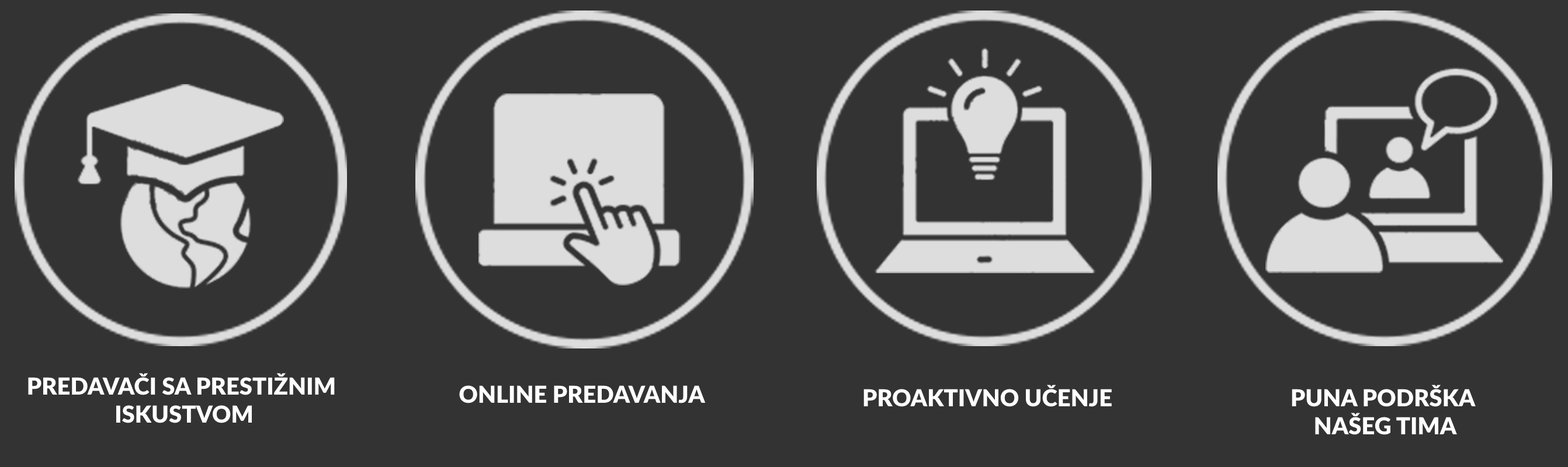
<style>
.page{position:relative;width:1568px;height:467px;background:#333333}
.page>*{position:absolute;margin:0}
.t1{font:23.4px "Lato-Black";color:#ffffff}
</style>
<div class="page">
<p class="t1" style="left:28px;top:373px;width:307px;height:51px;text-align:center">PREDAVAČI SA PRESTIŽNIM <br>ISKUSTVOM</p>
<p class="t1" style="left:459px;top:386px;width:247px;height:18px">ONLINE PREDAVANJA</p>
<p class="t1" style="left:863px;top:385px;width:249px;height:22px">PROAKTIVNO UČENJE</p>
<p class="t1" style="left:1292px;top:385px;width:184px;height:50px;text-align:center">PUNA PODRŠKA <br>NAŠEG TIMA</p>
</div>
